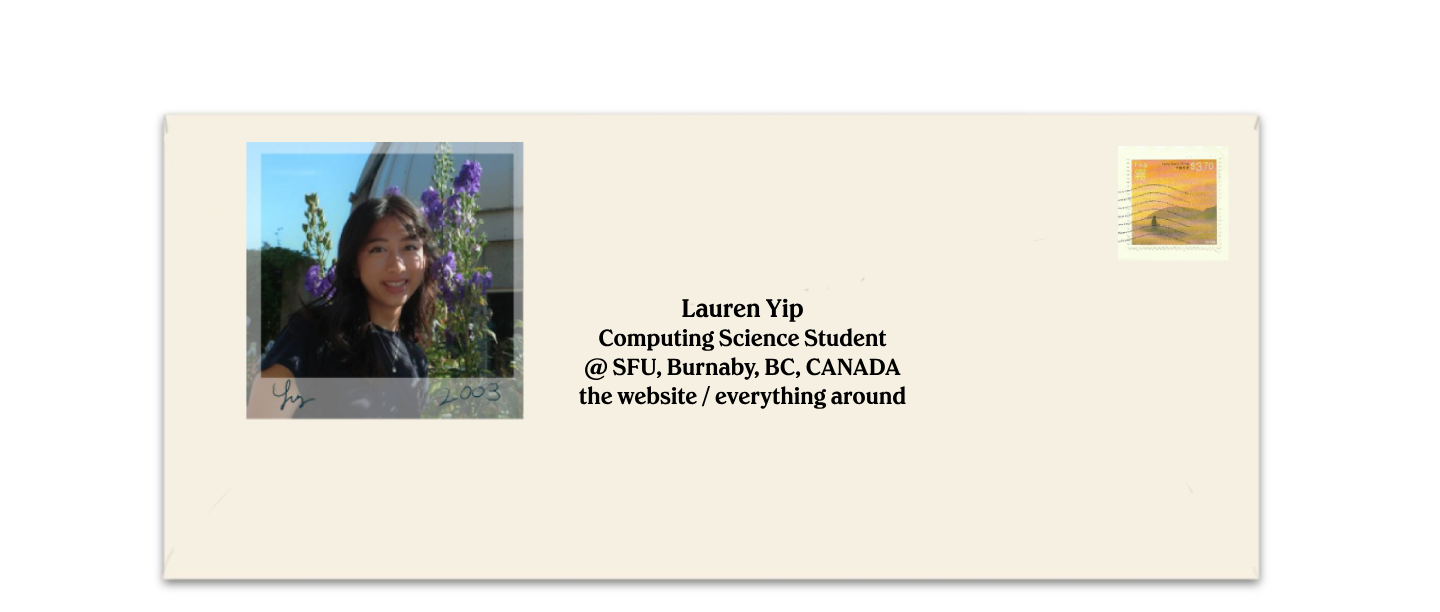
<style>
.page{position:relative;width:1440px;height:612px;background:#f6f0e2}
.page>*{position:absolute;margin:0}
.t1{font:24px "ChobaniSerifWeb-Semibold";color:#000000}
.t2{font:26px "ChobaniSerifWeb-Semibold";color:#000000}
</style>
<div class="page">
<p class="t1" style="left:579px;top:298px;width:327px;height:111px;text-align:center"><span class="t2">Lauren Yip<br></span>Computing Science Student <br>@ SFU, Burnaby, BC, CANADA<br>the website / everything around</p>
</div>
